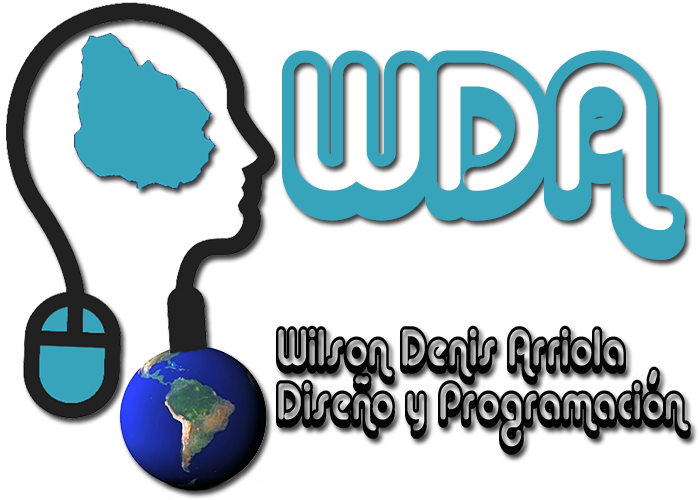
<style>
.page{position:relative;width:700px;height:500px;background:#ffffff}
.page>*{position:absolute;margin:0}
.t1{font:179.8px "AlbaSuper";color:#38a4bb}
.t2{font:50.4px "AlbaSuper";color:#040404;scale:0.77 1}
</style>
<div class="page">
<p class="t1" style="left:282px;top:50px;width:403px;height:210px">WDA</p>
<p class="t2" style="left:276px;top:325px;width:415px;height:130px">Wilson Denis Arriola<br>Diseño y Programación</p>
</div>
